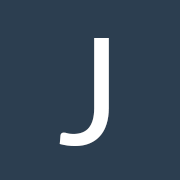
<style>
.page{position:relative;width:180px;height:180px;background:#2c3e50}
.page>*{position:absolute;margin:0}
.t1{font:150px "Lato-Regular";color:#ffffff}
</style>
<div class="page">
<p class="t1" style="left:59px;top:38px;width:50px;height:108px">J</p>
</div>
